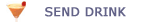
<style>
.page{position:relative;width:145px;height:23px;background:#ffffff}
.page>*{position:absolute;margin:0}
.t1{font:12px "Verdana";color:#636388;font-weight:bold}
</style>
<div class="page">
<p class="t1" style="left:45px;top:7px;width:81px;height:10px">SEND DRINK</p>
</div>
